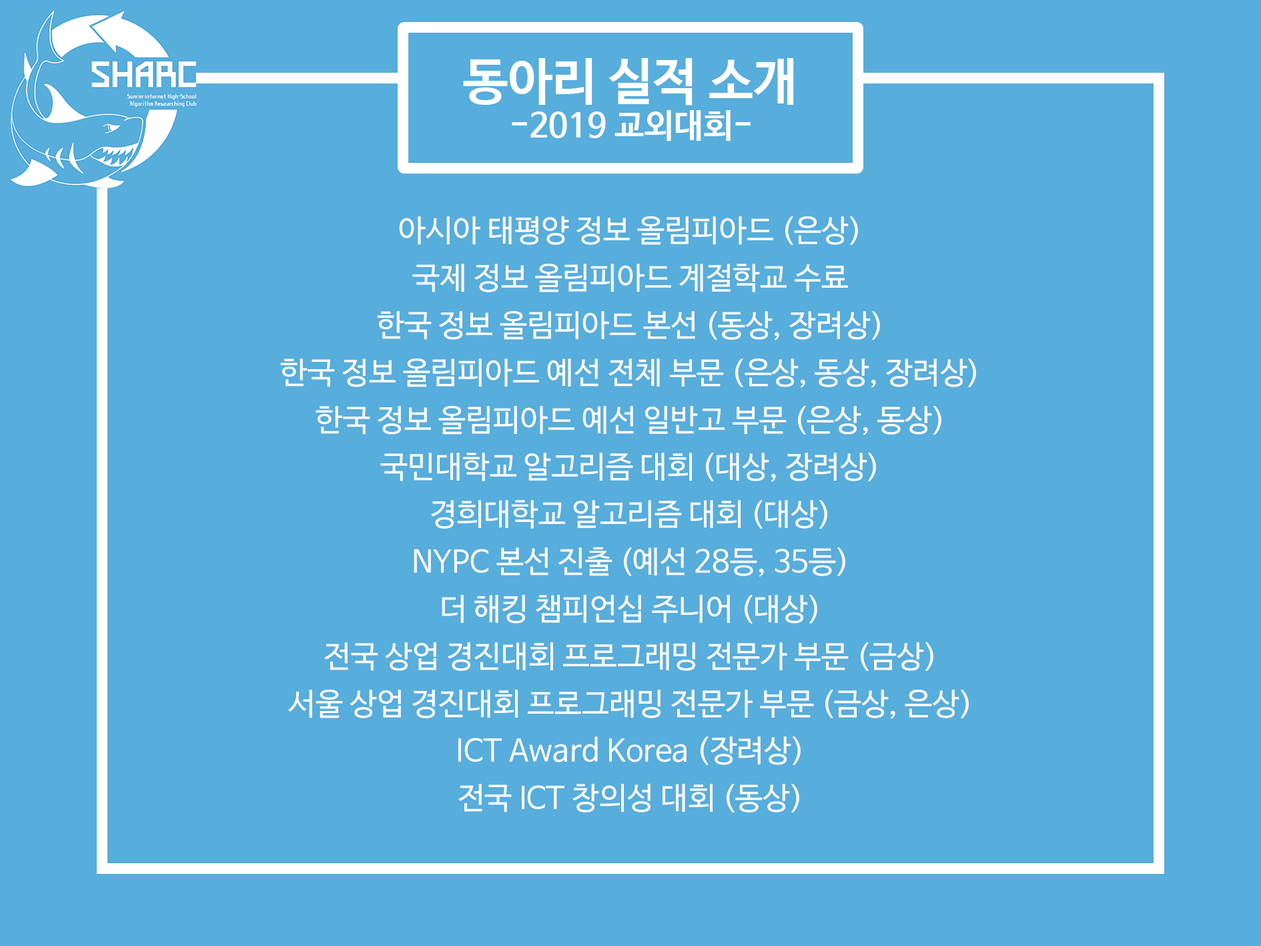
<style>
.page{position:relative;width:1261px;height:946px;background:#57addb}
.page>*{position:absolute;margin:0}
.t1{font:50px "NanumBarunGothicBold";color:#ffffff}
.t2{font:33.4px "NanumBarunGothicBold";color:#ffffff}
.t3{font:30.6px/47.3px "NanumBarunGothic";color:#ffffff}
</style>
<div class="page">
<p class="t1" style="left:463px;top:58px;width:331px;height:47px">동아리 실적 소개</p>
<p class="t2" style="left:512px;top:110px;width:239px;height:31px">-2019 교외대회-</p>
<p class="t3" style="left:280px;top:216px;width:696px;height:596px;text-align:center">아시아 태평양 정보 올림피아드 (은상)<br>국제 정보 올림피아드 계절학교 수료<br>한국 정보 올림피아드 본선 (동상, 장려상)<br>한국 정보 올림피아드 예선 전체 부문 (은상, 동상, 장려상)<br>한국 정보 올림피아드 예선 일반고 부문 (은상, 동상)<br>국민대학교 알고리즘 대회 (대상, 장려상)<br>경희대학교 알고리즘 대회 (대상)<br>NYPC 본선 진출 (예선 28등, 35등)<br>더 해킹 챔피언십 주니어 (대상)<br>전국 상업 경진대회 프로그래밍 전문가 부문 (금상)<br>서울 상업 경진대회 프로그래밍 전문가 부문 (금상, 은상)<br>ICT Award Korea (장려상)<br>전국 ICT 창의성 대회 (동상)</p>
</div>
